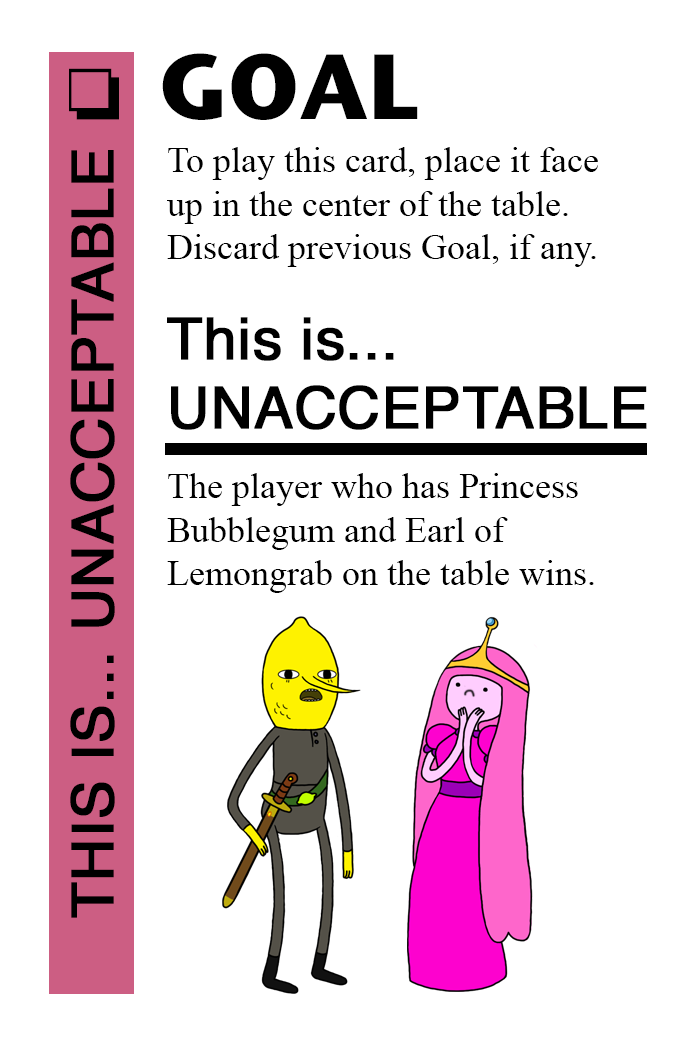
<style>
.page{position:relative;width:700px;height:1042px;background:#ffffff}
.page>*{position:absolute;margin:0}
.t1{font:92px "StoneSansITC-Bold";color:#000000}
.t2{font:72px "MS-Gothic";color:#000000}
.t3{font:58px "Helvetica";color:#000000;font-weight:bold}
.t4{font:36px "TimesNewRomanPSMT";color:#000000}
</style>
<div class="page">
<p class="t1" style="left:162px;top:53px;width:256px;height:67px">GOAL</p>
<p class="t2" style="left:69px;top:68px;width:50px;height:52px">❏</p>
<p class="t3" style="left:70px;top:150px;width:45px;height:768px;rotate:-90deg">THIS IS... UNACCEPTABLE</p>
<p class="t4" style="left:167px;top:147px;width:431px;height:120px">To play this card, place it face<br>up in the center of the table.<br>Discard previous Goal, if any.</p>
<p class="t3" style="left:167px;top:317px;width:480px;height:113px">This is...<br>UNACCEPTABLE</p>
<p class="t4" style="left:167px;top:473px;width:427px;height:120px">The player who has Princess <br>Bubblegum and Earl of<br>Lemongrab on the table wins.</p>
</div>
